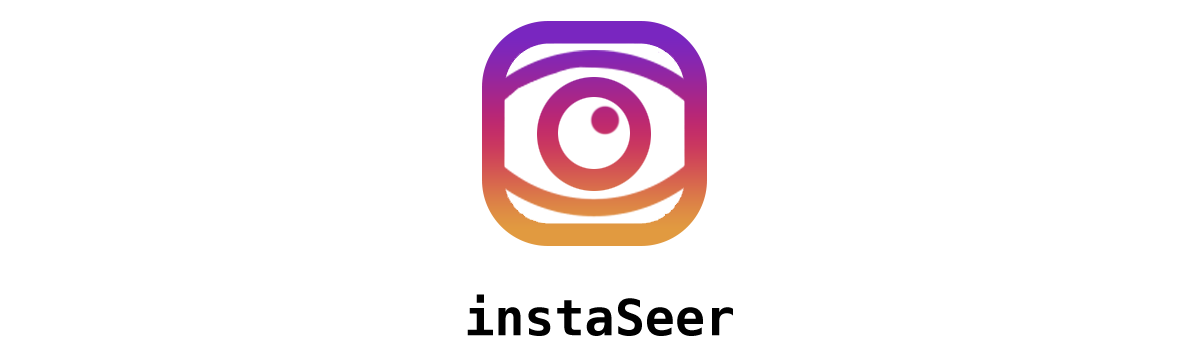
<style>
.page{position:relative;width:1200px;height:362px;background:#ffffff}
.page>*{position:absolute;margin:0}
.t1{font:50px "Menlo-Bold";color:#000000}
</style>
<div class="page">
<p class="t1" style="left:467px;top:294px;width:266px;height:42px">instaSeer</p>
</div>
